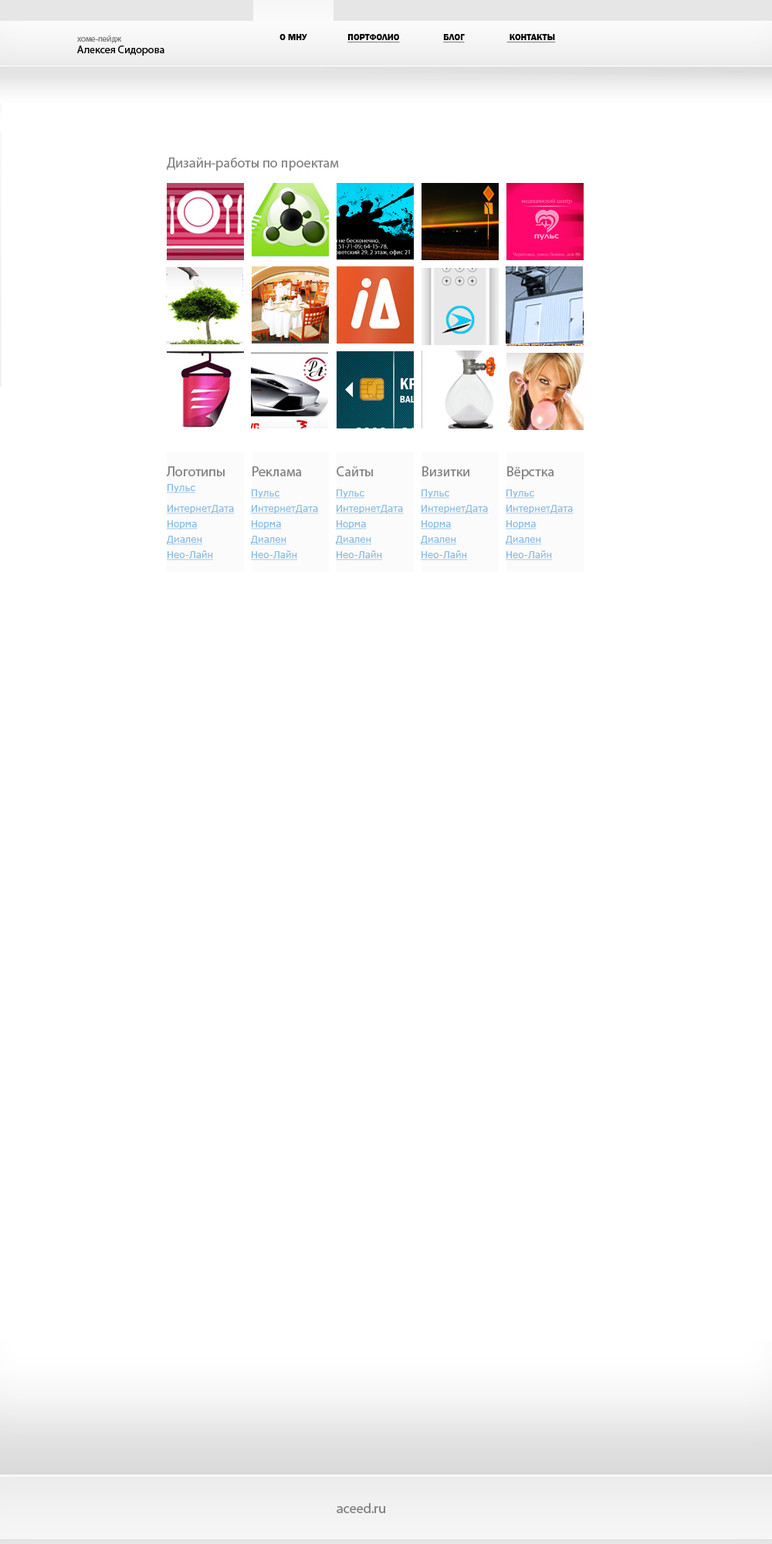
<style>
.page{position:relative;width:772px;height:1544px;background:#ffffff}
.page>*{position:absolute;margin:0}
.t1{font:8.5px "MyriadPro-Regular";color:#808080}
.t2{font:9.3px "FranklinGothic-Demi";color:#000000;text-transform:uppercase}
.t3{font:9.3px "FranklinGothic-Demi";color:#000000;text-transform:uppercase;text-decoration:underline}
.t4{font:10.8px "MyriadPro-Regular";color:#000000}
.t5{font:13.9px "MyriadPro-Regular";color:#858585}
.t6{font:13.9px "MyriadPro-Regular";color:#838383}
.t7{font:9.3px "Verdana";color:#85b9e1;text-decoration:underline}
</style>
<div class="page">
<p class="t1" style="left:77px;top:36px;width:45px;height:7px">хоме-пейдж</p>
<p class="t2" style="left:280px;top:34px;width:27px;height:6px">о мну</p>
<p class="t3" style="left:347px;top:34px;width:53px;height:8px">портфолио</p>
<p class="t3" style="left:443px;top:34px;width:22px;height:8px">блог</p>
<p class="t3" style="left:507px;top:34px;width:49px;height:8px">Контакты</p>
<p class="t4" style="left:77px;top:46px;width:87px;height:10px">Алексея Сидорова</p>
<p class="t5" style="left:167px;top:158px;width:172px;height:13px">Дизайн-работы по проектам</p>
<p class="t6" style="left:166px;top:466px;width:59px;height:10px">Логотипы</p>
<p class="t6" style="left:252px;top:466px;width:50px;height:10px">Реклама</p>
<p class="t6" style="left:337px;top:466px;width:36px;height:10px">Сайты</p>
<p class="t6" style="left:422px;top:466px;width:47px;height:10px">Визитки</p>
<p class="t6" style="left:507px;top:466px;width:47px;height:14px">Вёрстка</p>
<p class="t7" style="left:167px;top:484px;width:28px;height:9px">Пульс</p>
<p class="t7" style="left:251px;top:490px;width:29px;height:9px">Пульс</p>
<p class="t7" style="left:336px;top:490px;width:28px;height:9px">Пульс</p>
<p class="t7" style="left:421px;top:490px;width:28px;height:9px">Пульс</p>
<p class="t7" style="left:506px;top:490px;width:28px;height:9px">Пульс</p>
<p class="t7" style="left:167px;top:505px;width:68px;height:9px">ИнтернетДата</p>
<p class="t7" style="left:251px;top:505px;width:68px;height:9px">ИнтернетДата</p>
<p class="t7" style="left:336px;top:505px;width:68px;height:9px">ИнтернетДата</p>
<p class="t7" style="left:421px;top:505px;width:68px;height:9px">ИнтернетДата</p>
<p class="t7" style="left:506px;top:505px;width:68px;height:9px">ИнтернетДата</p>
<p class="t7" style="left:167px;top:520px;width:31px;height:10px">Норма</p>
<p class="t7" style="left:251px;top:520px;width:31px;height:10px">Норма</p>
<p class="t7" style="left:336px;top:520px;width:31px;height:10px">Норма</p>
<p class="t7" style="left:421px;top:520px;width:31px;height:10px">Норма</p>
<p class="t7" style="left:506px;top:520px;width:31px;height:10px">Норма</p>
<p class="t7" style="left:167px;top:536px;width:36px;height:9px">Диален</p>
<p class="t7" style="left:251px;top:536px;width:36px;height:9px">Диален</p>
<p class="t7" style="left:336px;top:536px;width:36px;height:9px">Диален</p>
<p class="t7" style="left:421px;top:536px;width:36px;height:9px">Диален</p>
<p class="t7" style="left:506px;top:536px;width:36px;height:9px">Диален</p>
<p class="t7" style="left:167px;top:551px;width:47px;height:10px">Нео-Лайн</p>
<p class="t7" style="left:251px;top:551px;width:47px;height:10px">Нео-Лайн</p>
<p class="t7" style="left:336px;top:551px;width:47px;height:10px">Нео-Лайн</p>
<p class="t7" style="left:421px;top:551px;width:47px;height:10px">Нео-Лайн</p>
<p class="t7" style="left:506px;top:551px;width:47px;height:10px">Нео-Лайн</p>
</div>
